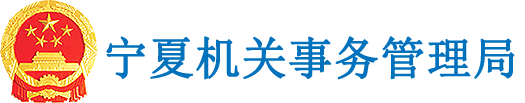
<style>
.page{position:relative;width:525px;height:103px;background:#ffffff}
.page>*{position:absolute;margin:0}
.t1{font:45px "SimSun";color:#0272bd;font-weight:bold}
</style>
<div class="page">
<p class="t1" style="left:106px;top:36px;width:409px;height:44px">宁夏机关事务管理局</p>
</div>
